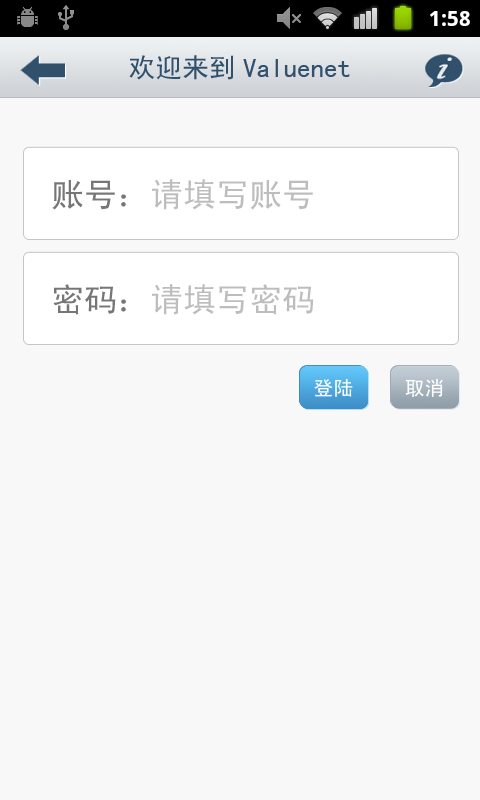
<style>
.page{position:relative;width:480px;height:800px;background:#f8f8f8}
.page>*{position:absolute;margin:0}
.t1{font:27px "SimHei";color:#30506c}
.t2{font:33px "SimHei";color:#bebdbd}
.t3{font:33px "SimHei";color:#767676}
.t4{font:20px "SimHei";color:#ffffff}
</style>
<div class="page">
<p class="t1" style="left:129px;top:55px;width:221px;height:25px">欢迎来到Valuenet</p>
<p class="t2" style="left:52px;top:179px;width:261px;height:31px"><span class="t3">账号：</span>请填写账号</p>
<p class="t2" style="left:53px;top:284px;width:261px;height:31px"><span class="t3">密码：</span>请填写密码</p>
<p class="t4" style="left:314px;top:378px;width:39px;height:19px">登陆</p>
<p class="t4" style="left:405px;top:379px;width:38px;height:18px">取消</p>
</div>
